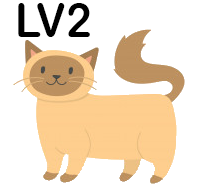
<style>
.page{position:relative;width:202px;height:186px;background:#ffffff}
.page>*{position:absolute;margin:0}
.t1{font:47.4px "ArialRoundedMTBold";color:#000000;scale:0.92 1}
</style>
<div class="page">
<p class="t1" style="left:18px;top:3px;width:72px;height:34px">LV2</p>
</div>
